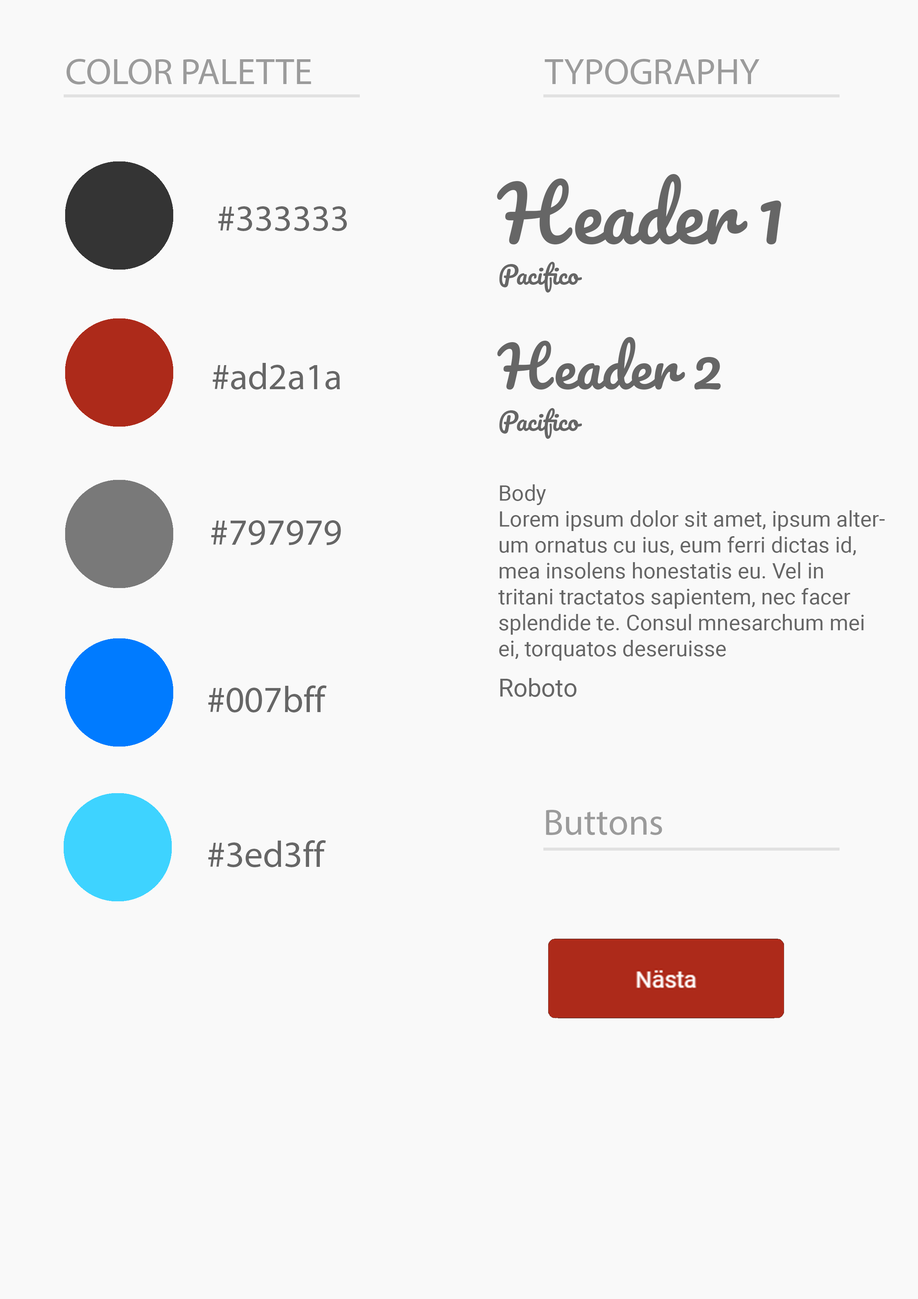
<style>
.page{position:relative;width:918px;height:1299px;background:#f9f9f9}
.page>*{position:absolute;margin:0}
.t1{font:37px "MyriadHebrew-Regular";color:#9b9b9b}
.t2{font:74px "Pacifico-Regular";color:#666666}
.t3{font:37px "MyriadHebrew-Regular";color:#666666}
.t4{font:24.7px "Pacifico-Regular";color:#666666}
.t5{font:55.5px "Pacifico-Regular";color:#666666}
.t6{font:21.6px "Roboto-Regular";color:#666666}
.t7{font:24.7px "Roboto-Regular";color:#666666}
</style>
<div class="page">
<p class="t1" style="left:66px;top:59px;width:245px;height:25px">COLOR PALETTE</p>
<p class="t1" style="left:545px;top:59px;width:215px;height:25px">TYPOGRAPHY</p>
<p class="t2" style="left:497px;top:174px;width:285px;height:70px">Header 1</p>
<p class="t3" style="left:218px;top:206px;width:129px;height:25px">#333333</p>
<p class="t4" style="left:499px;top:262px;width:83px;height:30px">Pacifico</p>
<p class="t5" style="left:497px;top:337px;width:224px;height:52px">Header 2</p>
<p class="t3" style="left:213px;top:363px;width:127px;height:26px">ad2a1a#</p>
<p class="t4" style="left:499px;top:408px;width:83px;height:31px">Pacifico</p>
<p class="t6" style="left:498px;top:484px;width:387px;height:176px;text-align:right">Body<br>Lorem ipsum dolor sit amet, ipsum alterum ornatus cu ius, eum ferri dictas id, mea insolens honestatis eu. Vel in tritani tractatos sapientem, nec facer splendide te. Consul mnesarchum mei ei, torquatos deseruisse</p>
<p class="t3" style="left:211px;top:520px;width:130px;height:25px">#797979</p>
<p class="t7" style="left:500px;top:678px;width:77px;height:19px">Roboto</p>
<p class="t3" style="left:208px;top:685px;width:119px;height:27px">007bff#</p>
<p class="t1" style="left:546px;top:810px;width:116px;height:25px">Buttons</p>
<p class="t3" style="left:208px;top:840px;width:118px;height:27px">#3ed3ff</p>
</div>
